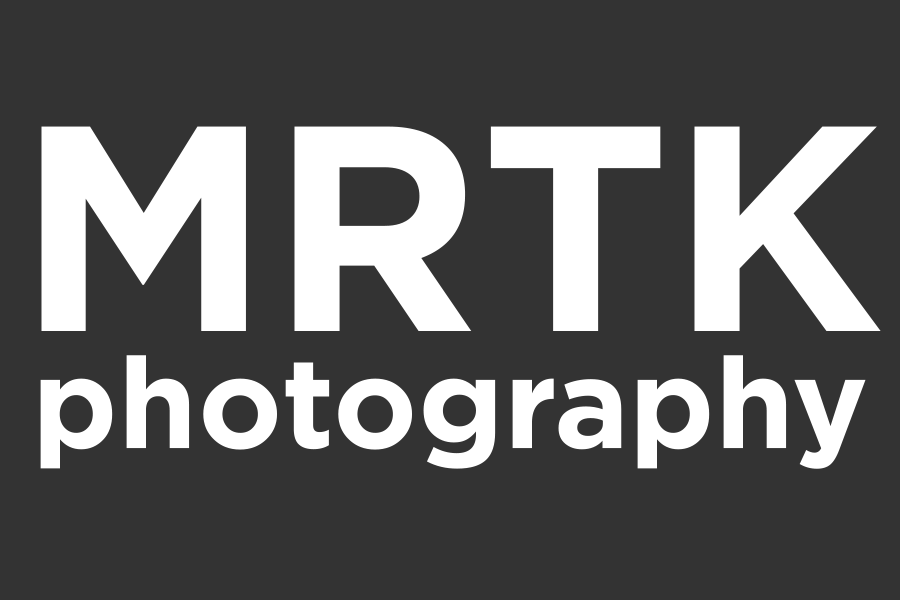
<style>
.page{position:relative;width:900px;height:600px;background:#333333}
.page>*{position:absolute;margin:0}
.t1{font:291.7px "GothamPro-Bold";color:#ffffff}
.t2{font:127.3px "GothamPro-Bold";color:#ffffff}
</style>
<div class="page">
<p class="t1" style="left:41px;top:126px;width:840px;height:205px">MRTK</p>
<p class="t2" style="left:40px;top:355px;width:826px;height:114px">photography</p>
</div>
